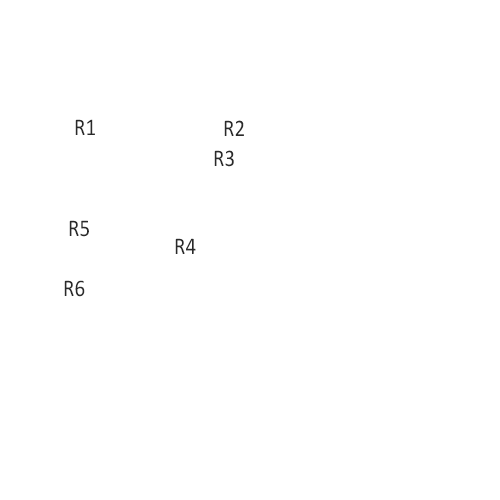
<style>
.page{position:relative;width:500px;height:500px;background:#ffffff}
.page>*{position:absolute;margin:0}
.t1{font:24px "Calibri";color:#2a2a2a;scale:0.88 1}
</style>
<div class="page">
<p class="t1" style="left:75px;top:119px;width:20px;height:16px">R1</p>
<p class="t1" style="left:224px;top:120px;width:20px;height:16px">R2</p>
<p class="t1" style="left:214px;top:150px;width:20px;height:17px">R3</p>
<p class="t1" style="left:69px;top:220px;width:20px;height:17px">R5</p>
<p class="t1" style="left:175px;top:238px;width:21px;height:16px">R4</p>
<p class="t1" style="left:64px;top:280px;width:21px;height:17px">R6</p>
</div>
